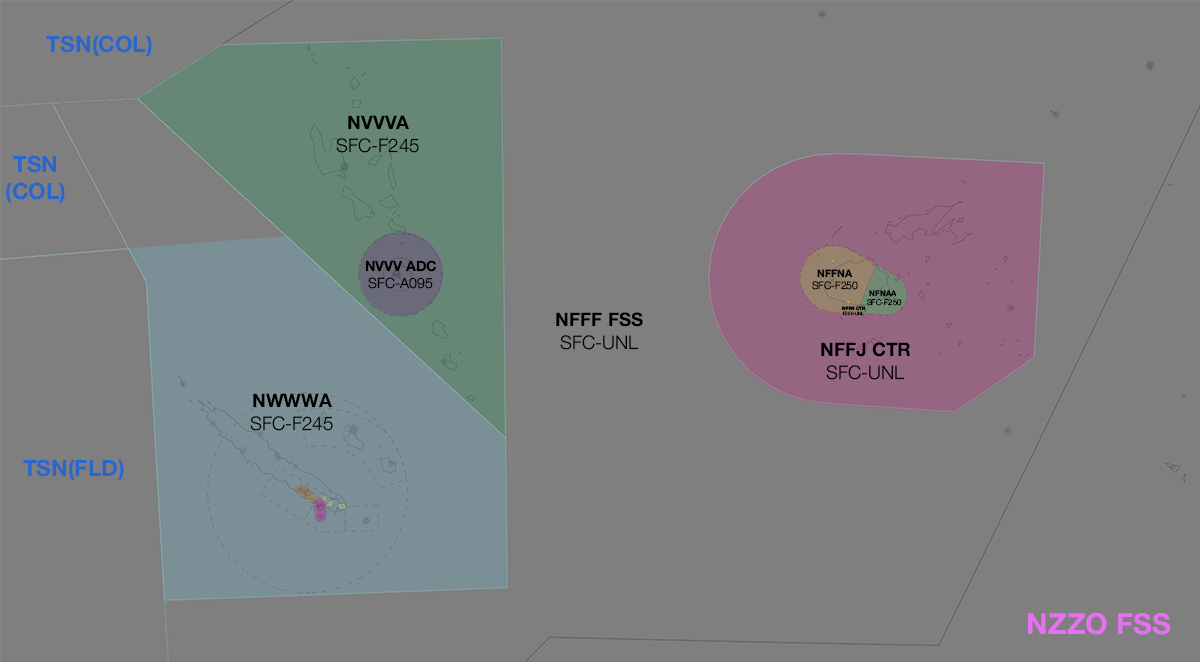
<style>
.page{position:relative;width:1200px;height:662px;background:#7f7f7f}
.page>*{position:absolute;margin:0}
.t1{font:22.5px "HelveticaNeue-Bold";color:#2967cf}
.t2{font:18.8px "HelveticaNeue-Light";color:#000000}
.t3{font:18.8px "HelveticaNeue-Bold";color:#000000}
.t4{font:14.2px "HelveticaNeue-Bold";color:#000000}
.t5{font:14.2px "HelveticaNeue-Light";color:#000000}
.t6{font:10.4px "HelveticaNeue-Light";color:#000000}
.t7{font:10.4px "HelveticaNeue-Bold";color:#000000}
.t8{font:7.8px "HelveticaNeue-Light";color:#000000}
.t9{font:7.8px "HelveticaNeue-Bold";color:#000000}
.t10{font:4.7px "HelveticaNeue-Bold";color:#000000}
.t11{font:4.7px "HelveticaNeue-Light";color:#000000}
.t12{font:29.1px "HelveticaNeue-Bold";color:#e570f1}
</style>
<div class="page">
<p class="t1" style="left:46px;top:35px;width:106px;height:21px">TSN(COL)</p>
<p class="t2" style="left:336px;top:115px;width:83px;height:38px;text-align:center"><span class="t3">NVVVA<br></span>SFC-F245</p>
<p class="t1" style="left:6px;top:155px;width:59px;height:48px;text-align:center">TSN<br>(COL)</p>
<p class="t4" style="left:365px;top:260px;width:71px;height:29px;text-align:center">NVVV ADC<br><span class="t5">SFC-A095</span></p>
<p class="t6" style="left:812px;top:269px;width:46px;height:21px;text-align:center"><span class="t7">NFFNA<br></span>SFC-F250</p>
<p class="t8" style="left:867px;top:290px;width:35px;height:16px;text-align:center"><span class="t9">NFNAA <br></span>SFC-F250</p>
<p class="t3" style="left:556px;top:312px;width:87px;height:38px;text-align:center">NFFF FSS<br><span class="t2">SFC-UNL</span></p>
<p class="t10" style="left:842px;top:306px;width:24px;height:10px;text-align:center">NFFN CTR<br><span class="t11">F250-UNL</span></p>
<p class="t3" style="left:821px;top:342px;width:89px;height:38px;text-align:center">NFFJ CTR<br><span class="t2">SFC-UNL</span></p>
<p class="t2" style="left:250px;top:393px;width:83px;height:38px;text-align:center"><span class="t3">NWWWA<br></span>SFC-F245</p>
<p class="t1" style="left:23px;top:459px;width:101px;height:21px">TSN(FLD)</p>
<p class="t12" style="left:1028px;top:612px;width:143px;height:23px">NZZO FSS</p>
</div>
